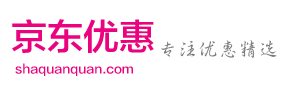
<style>
.page{position:relative;width:297px;height:90px;background:#ffffff}
.page>*{position:absolute;margin:0}
.t1{font:36px "FZLTZHK--GBK1-0";color:#eb027f}
.t2{font:12px "FZLTZHK--GBK1-0";color:#eb027f}
</style>
<div class="page">
<p class="t1" style="left:12px;top:19px;width:142px;height:34px">京东优惠</p>
<p class="t2" style="left:15px;top:63px;width:118px;height:13px">shaquanquan.com</p>
</div>
